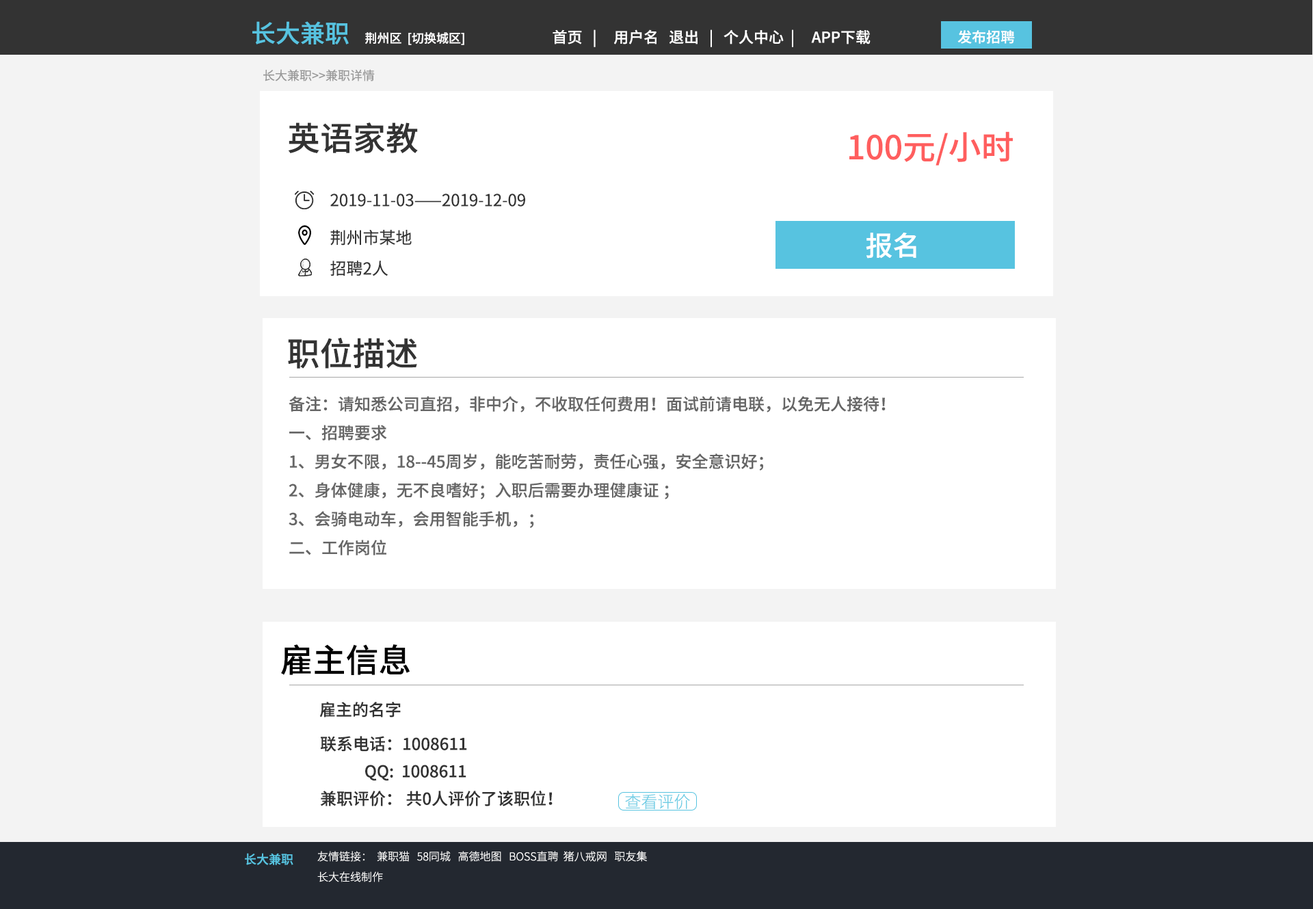
<style>
.page{position:relative;width:1313px;height:909px;background:#f3f3f3}
.page>*{position:absolute;margin:0}
.t1{font:24.6px "SourceHanSansCN-Medium";color:#57c3e0}
.t2{font:15px "SourceHanSansCN-Medium";color:#ffffff}
.t3{font:12.3px "SourceHanSansCN-Medium";color:#fffefe}
.t4{font:14.2px "SourceHanSansCN-Medium";color:#fffefe}
.t5{font:12.3px "SourceHanSansCN-Regular";color:#999999}
.t6{font:32.8px "SourceHanSansCN-Medium";color:#333333}
.t7{font:32.8px "SourceHanSansCN-Medium";color:#ff5e5e}
.t8{font:16.4px "SourceHanSansCN-Regular";color:#333333}
.t9{font:27.3px "SourceHanSansCN-Medium";color:#ffffff}
.t10{font:16.4px "SourceHanSansCN-Medium";color:#666666}
.t11{font:32.8px "SourceHanSansCN-Medium";color:#000000}
.t12{font:16.4px "SourceHanSansCN-Medium";color:#333333}
.t13{font:16.4px "SourceHanSansCN-Light";color:#6fcde5}
.t14{font:12.3px "SourceHanSansCN-Medium";color:#57c3e0}
.t15{font:10.9px "SourceHanSansCN-Light";color:#ffffff}
</style>
<div class="page">
<p class="t1" style="left:252px;top:21px;width:97px;height:23px">长大兼职</p>
<p class="t2" style="left:552px;top:29px;width:318px;height:18px">首页   |     用户名   退出   |   个人中心  |     APP下载</p>
<p class="t3" style="left:365px;top:32px;width:99px;height:13px">荆州区  [切换城区]</p>
<p class="t4" style="left:957px;top:30px;width:57px;height:14px">发布招聘</p>
<p class="t5" style="left:263px;top:69px;width:112px;height:12px">长大兼职&gt;&gt;兼职详情</p>
<p class="t6" style="left:288px;top:122px;width:130px;height:31px">英语家教</p>
<p class="t7" style="left:849px;top:131px;width:163px;height:34px">100元/小时</p>
<p class="t8" style="left:330px;top:193px;width:195px;height:13px">2019-11-03——2019-12-09</p>
<p class="t8" style="left:330px;top:230px;width:82px;height:15px">荆州市某地</p>
<p class="t9" style="left:865px;top:232px;width:51px;height:26px">报名</p>
<p class="t8" style="left:330px;top:260px;width:58px;height:16px">招聘2人</p>
<p class="t6" style="left:288px;top:337px;width:129px;height:31px">职位描述</p>
<p class="t10" style="left:288px;top:396px;width:597px;height:159px">备注：请知悉公司直招，非中介，不收取任何费用！面试前请电联，以免无人接待！<br>一、招聘要求<br>1、男女不限，18--45周岁，能吃苦耐劳，责任心强，安全意识好；<br>2、身体健康，无不良嗜好；入职后需要办理健康证 ；<br>3、会骑电动车，会用智能手机，；<br>二、工作岗位<br>1、负责本区域内的专送订单任务。单量不用愁，天天爆单，就近分配。<br>2、送餐范围：配送站周边3公里左右。<br>3、取单模式：手机APP-系统排队取单，无需抢单， 不人为派单，系统优化派单<br>三、工作时间： 10：00-14：00 17:00-21:00 月休4天，可调休</p>
<p class="t11" style="left:281px;top:644px;width:128px;height:31px">雇主信息</p>
<p class="t12" style="left:319px;top:701px;width:82px;height:16px">雇主的名字</p>
<p class="t12" style="left:320px;top:736px;width:147px;height:15px">联系电话：1008611</p>
<p class="t12" style="left:365px;top:764px;width:101px;height:17px">QQ:  1008611</p>
<p class="t12" style="left:320px;top:790px;width:232px;height:16px">兼职评价： 共0人评价了该职位！</p>
<p class="t13" style="left:625px;top:793px;width:65px;height:16px">查看评价</p>
<p class="t14" style="left:245px;top:852px;width:48px;height:13px">长大兼职</p>
<p class="t15" style="left:317px;top:850px;width:330px;height:11px">友情链接：  兼职猫   58同城   高德地图   BOSS直聘  猪八戒网   职友集</p>
<p class="t15" style="left:317px;top:871px;width:66px;height:11px">长大在线制作</p>
</div>
